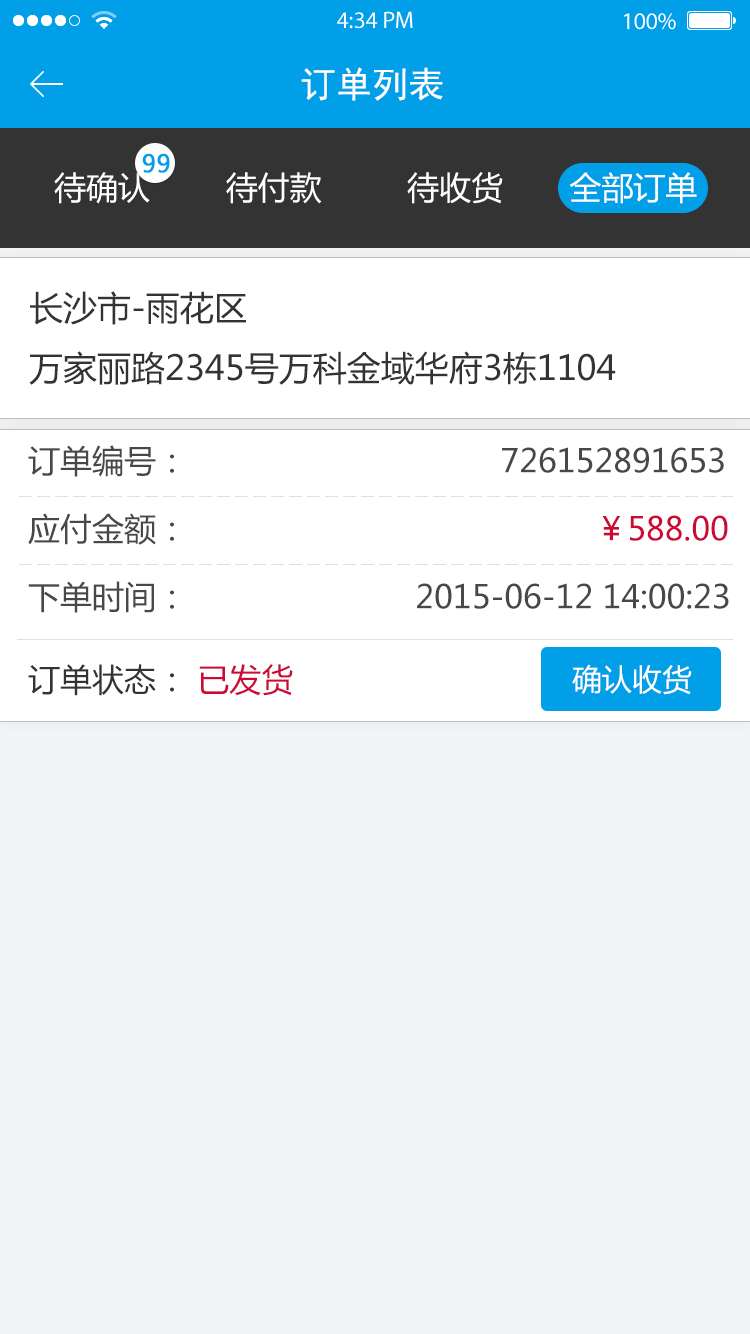
<style>
.page{position:relative;width:750px;height:1334px;background:#f3f4f6}
.page>*{position:absolute;margin:0}
.t1{font:36px "SimHei";color:#ffffff}
.t2{font:24px "MicrosoftYaHei";color:#009fe8;font-weight:bold}
.t3{font:32px "MicrosoftYaHei";color:#fefefe}
.t4{font:34px/60px "MicrosoftYaHei";color:#333333}
.t5{font:32px/68px "MicrosoftYaHei";color:#484848}
.t6{font:32px/68px "MicrosoftYaHei";color:#ce0a34}
.t7{font:32px "MicrosoftYaHei";color:#333333}
.t8{font:32px "MicrosoftYaHei";color:#ce0a34}
.t9{font:30px "MicrosoftYaHei";color:#ffffff}
</style>
<div class="page">
<p class="t1" style="left:301px;top:67px;width:142px;height:34px">订单列表</p>
<p class="t2" style="left:142px;top:153px;width:28px;height:20px">99</p>
<p class="t3" style="left:54px;top:172px;width:643px;height:32px">待确认        待付款         待收货       全部订单</p>
<p class="t4" style="left:29px;top:291px;width:587px;height:94px">长沙市-雨花区<br>万家丽路2345号万科金域华府3栋1104</p>
<p class="t5" style="left:28px;top:445px;width:701px;height:168px">订单编号：                                 726152891653<br>应付金额：                                           <span class="t6">￥588.00<br></span>下单时间：                        2015-06-12 14:00:23</p>
<p class="t7" style="left:28px;top:664px;width:265px;height:32px">订单状态：<span class="t8"> 已发货</span></p>
<p class="t9" style="left:572px;top:664px;width:120px;height:31px">确认收货</p>
</div>
